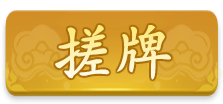
<style>
.page{position:relative;width:223px;height:104px}
.page>*{position:absolute;margin:0}
.t1{font:60px "AaBoruokaishuBldjf";letter-spacing:0.02em}
</style>
<div class="page">
<p class="t1" style="left:55px;top:25px;width:116px;height:55px">搓牌</p>
</div>
